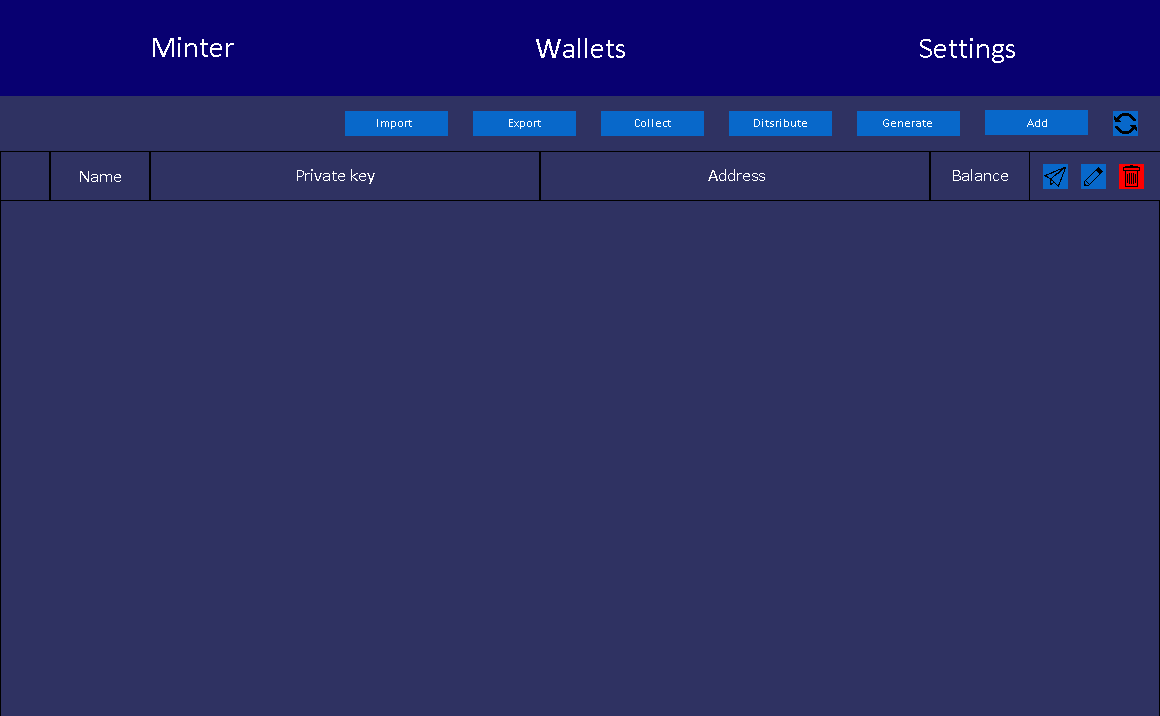
<style>
.page{position:relative;width:1160px;height:716px;background:#2f3262}
.page>*{position:absolute;margin:0}
.t1{font:30px "Calibri";color:#ffffff}
.t2{font:12px "Calibri";color:#ffffff}
.t3{font:18px "Calibri";color:#ffffff}
</style>
<div class="page">
<p class="t1" style="left:153px;top:37px;width:81px;height:20px">Minter</p>
<p class="t1" style="left:536px;top:38px;width:89px;height:20px">Wallets</p>
<p class="t1" style="left:920px;top:38px;width:95px;height:25px">Settings</p>
<p class="t2" style="left:377px;top:119px;width:35px;height:10px">Import</p>
<p class="t2" style="left:509px;top:119px;width:32px;height:10px">Export</p>
<p class="t2" style="left:635px;top:119px;width:36px;height:8px">Collect</p>
<p class="t2" style="left:754px;top:119px;width:53px;height:8px">Ditsribute</p>
<p class="t2" style="left:883px;top:119px;width:49px;height:8px">Generate</p>
<p class="t2" style="left:1027px;top:119px;width:20px;height:8px">Add</p>
<p class="t3" style="left:80px;top:171px;width:41px;height:11px">Name</p>
<p class="t3" style="left:297px;top:169px;width:78px;height:15px">Private key</p>
<p class="t3" style="left:708px;top:169px;width:57px;height:12px">Address</p>
<p class="t3" style="left:953px;top:169px;width:55px;height:12px">Balance</p>
</div>
